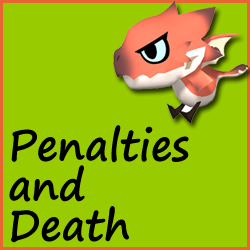
<style>
.page{position:relative;width:250px;height:250px;background:#99cc00}
.page>*{position:absolute;margin:0}
.t1{font:42.7px/40px "SegoePrint-Bold";color:#000000;scale:0.95 1}
</style>
<div class="page">
<p class="t1" style="left:9px;top:125px;width:180px;height:118px">Penalties <br>and <br>Death</p>
</div>
